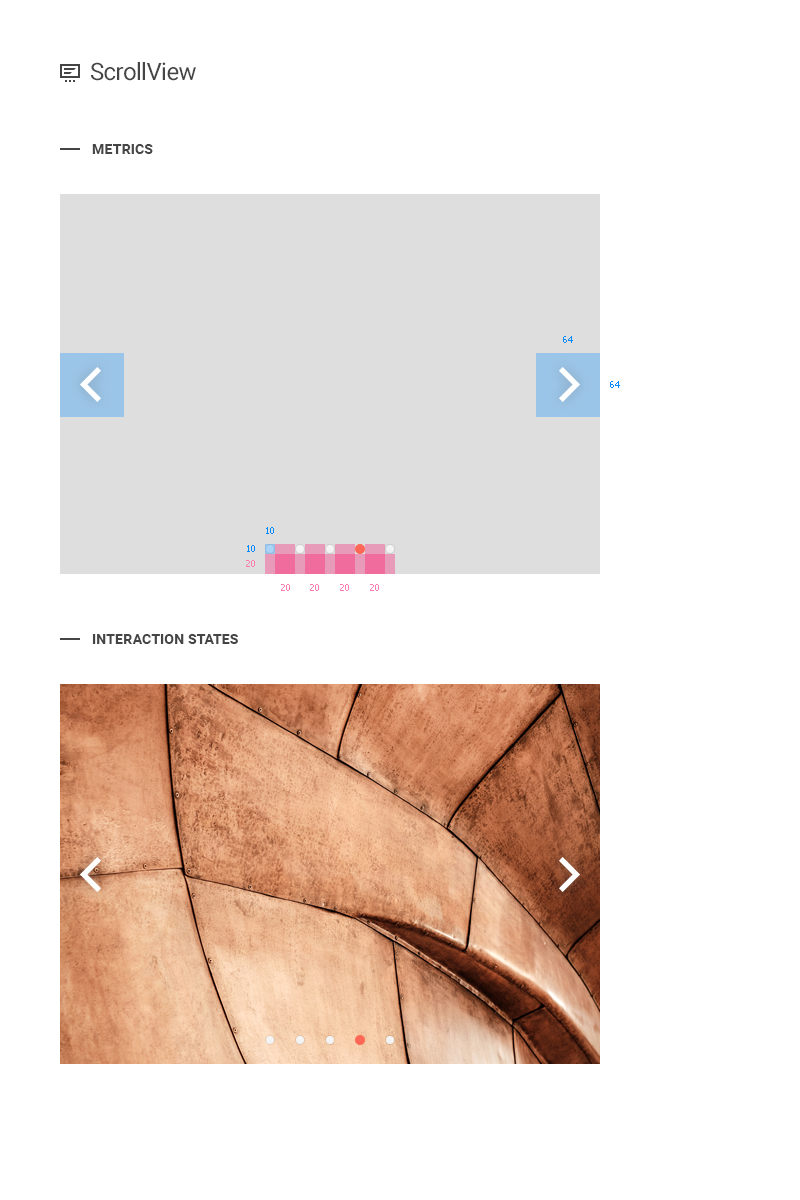
<style>
.page{position:relative;width:800px;height:1200px;background:#ffffff}
.page>*{position:absolute;margin:0}
.t1{font:24px "Roboto-Regular";letter-spacing:-0.025em;color:#454545}
.t2{font:14px "Roboto-Bold";letter-spacing:0.01em;color:#454545;text-transform:uppercase}
.t3{font:9px "Tahoma";color:#008aff}
.t4{font:9px "Tahoma";color:#ff7cae}
</style>
<div class="page">
<p class="t1" style="left:91px;top:62px;width:105px;height:19px">ScrollView</p>
<p class="t2" style="left:92px;top:144px;width:61px;height:10px">Metrics</p>
<p class="t3" style="left:563px;top:336px;width:10px;height:7px">64</p>
<p class="t3" style="left:610px;top:381px;width:10px;height:7px">64</p>
<p class="t3" style="left:266px;top:527px;width:8px;height:7px">10</p>
<p class="t3" style="left:247px;top:545px;width:8px;height:7px">10</p>
<p class="t4" style="left:246px;top:560px;width:9px;height:7px">20</p>
<p class="t4" style="left:281px;top:584px;width:9px;height:7px">20</p>
<p class="t4" style="left:310px;top:584px;width:9px;height:7px">20</p>
<p class="t4" style="left:340px;top:584px;width:9px;height:7px">20</p>
<p class="t4" style="left:370px;top:584px;width:9px;height:7px">20</p>
<p class="t2" style="left:92px;top:634px;width:146px;height:10px">Interaction States</p>
</div>
